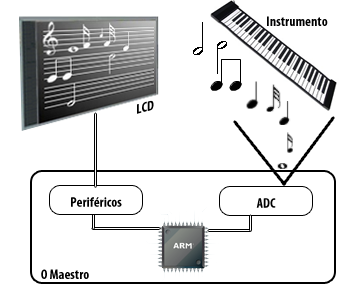
<style>
.page{position:relative;width:350px;height:300px;background:#ffffff}
.page>*{position:absolute;margin:0}
.t1{font:14px "MyriadPro-BoldCond";color:#000000}
.t2{font:14px "MyriadPro-BoldCond";color:#000000;scale:1.03 1}
</style>
<div class="page">
<p class="t1" style="left:267px;top:16px;width:61px;height:10px">Instrumento</p>
<p class="t2" style="left:137px;top:100px;width:17px;height:14px;rotate:-15deg">LCD</p>
<p class="t1" style="left:71px;top:197px;width:51px;height:10px">Periféricos</p>
<p class="t1" style="left:256px;top:198px;width:20px;height:10px">ADC</p>
<p class="t1" style="left:41px;top:269px;width:48px;height:10px">O Maestro</p>
</div>
